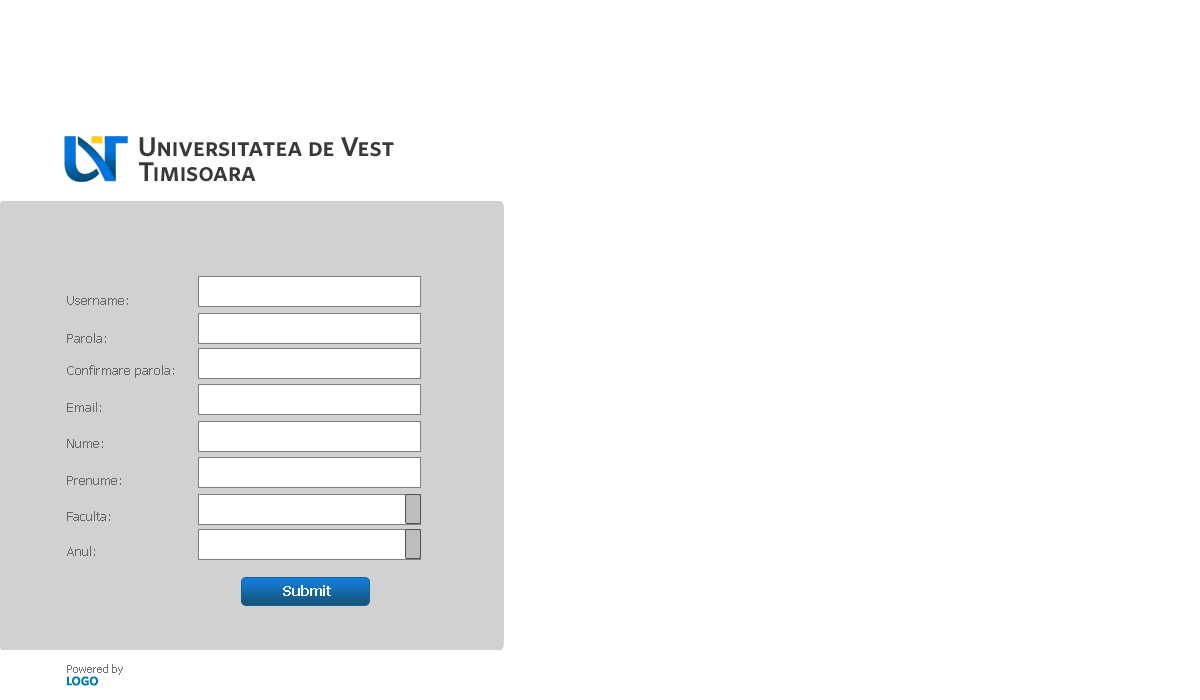
<style>
.page{position:relative;width:1200px;height:700px;background:#ffffff}
.page>*{position:absolute;margin:0}
.t1{font:13px "Tahoma";color:#666666}
.t2{font:14px "Tahoma-Bold";color:#ffffff}
.t3{font:11px "Tahoma";color:#717171}
</style>
<div class="page">
<p class="t1" style="left:67px;top:296px;width:61px;height:9px">Username:</p>
<p class="t1" style="left:67px;top:333px;width:39px;height:10px">Parola:</p>
<p class="t1" style="left:67px;top:365px;width:107px;height:13px">Confirmare parola:</p>
<p class="t1" style="left:67px;top:402px;width:34px;height:10px">Email:</p>
<p class="t1" style="left:67px;top:439px;width:36px;height:9px">Nume:</p>
<p class="t1" style="left:67px;top:476px;width:54px;height:9px">Prenume:</p>
<p class="t1" style="left:67px;top:511px;width:43px;height:10px">Faculta:</p>
<p class="t1" style="left:67px;top:546px;width:28px;height:10px">Anul:</p>
<p class="t2" style="left:283px;top:585px;width:48px;height:11px">Submit</p>
<p class="t3" style="left:67px;top:664px;width:56px;height:11px">Powered by</p>
</div>
